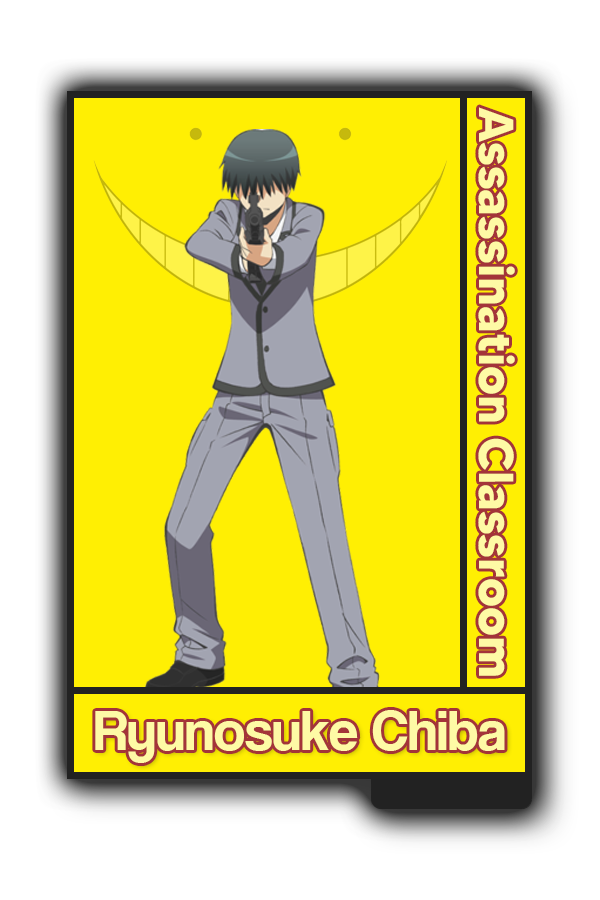
<style>
.page{position:relative;width:600px;height:900px;background:#ffef03}
.page>*{position:absolute;margin:0}
.t1{font:48.8px "MADETOMMY-Bold";color:#fefaa5}
.t2{font:57.8px "CoolveticaRg-Regular";color:#fefaa5}
</style>
<div class="page">
<p class="t1" style="left:478px;top:107px;width:37px;height:569px;rotate:90deg">Assassination Classroom</p>
<p class="t2" style="left:95px;top:710px;width:410px;height:53px">Ryunosuke Chiba</p>
</div>
